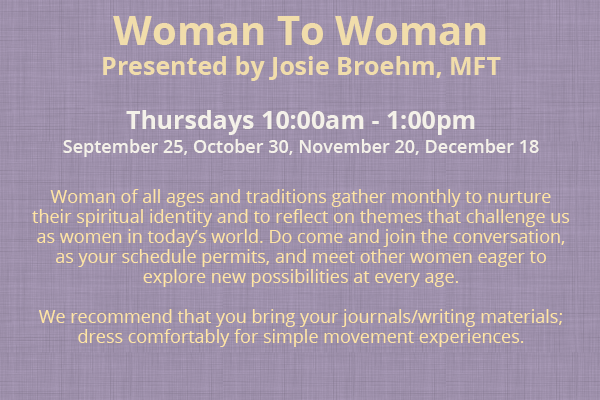
<style>
.page{position:relative;width:600px;height:400px}
.page>*{position:absolute;margin:0}
.t1{font:18px/20px "OpenSans";color:#ffe5a4}
.t2{font:40px/30px "OpenSans-Bold";color:#f1ddab}
.t3{font:25px/30px "OpenSans-Bold";color:#f1ddab}
.t4{font:25px/24px "OpenSans-Bold";color:#f4f1e9}
.t5{font:18px/24px "OpenSans-Semibold";color:#f4f1e9}
</style>
<div class="page">
<p class="t1" style="left:32px;top:16px;width:538px;height:331px;text-align:center"><span class="t2">Woman To Woman<br></span><span class="t3">Presented by Josie Broehm, MFT<br><br></span><span class="t4">Thursdays 10:00am - 1:00pm<br></span><span class="t5">September 25, October 30, November 20, December 18<br><br></span>Woman of all ages and traditions gather monthly to nurture their spiritual identity and to reflect on themes that challenge us as women in today’s world. Do come and join the conversation, as your schedule permits, and meet other women eager to explore new possibilities at every age.<br><br>We recommend that you bring your journals/writing materials; dress comfortably for simple movement experiences.</p>
</div>
